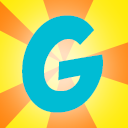
<style>
.page{position:relative;width:128px;height:128px;background:#00bcd4}
.page>*{position:absolute;margin:0}
.t1{font:91.9px "ObelixPro";color:#00bcd4}
</style>
<div class="page">
<p class="t1" style="left:22px;top:15px;width:81px;height:98px">G</p>
</div>
